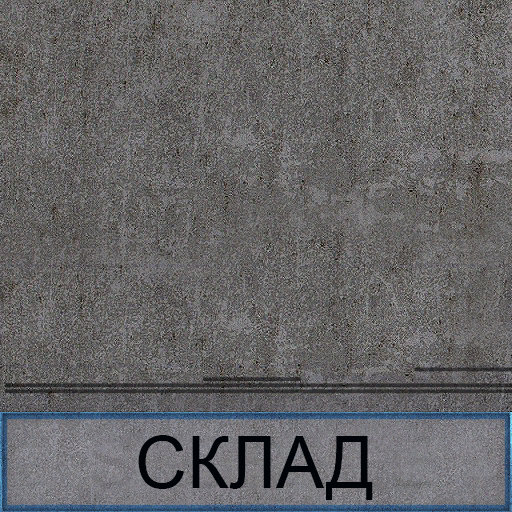
<style>
.page{position:relative;width:512px;height:512px}
.page>*{position:absolute;margin:0}
.t1{font:72px "ArialMT";color:#000408}
</style>
<div class="page">
<p class="t1" style="left:138px;top:435px;width:235px;height:65px">СКЛАД</p>
</div>
